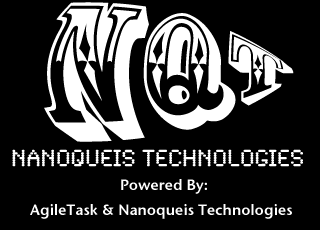
<style>
.page{position:relative;width:320px;height:230px;background:#000000}
.page>*{position:absolute;margin:0}
.t1{font:100px "RosewoodStd-Regular";color:#ffffff}
.t2{font:24px "SynchroLET";color:#ffffff}
.t3{font:15px "StoneSansSemITCTTSemi";color:#ffffff}
</style>
<div class="page">
<p class="t1" style="left:44px;top:2px;width:250px;height:140px">NQT</p>
<p class="t2" style="left:12px;top:149px;width:291px;height:18px">NanoQueis Technologies</p>
<p class="t3" style="left:30px;top:179px;width:262px;height:40px;text-align:center">Powered By:<br>AgileTask &amp; Nanoqueis Technologies</p>
</div>
